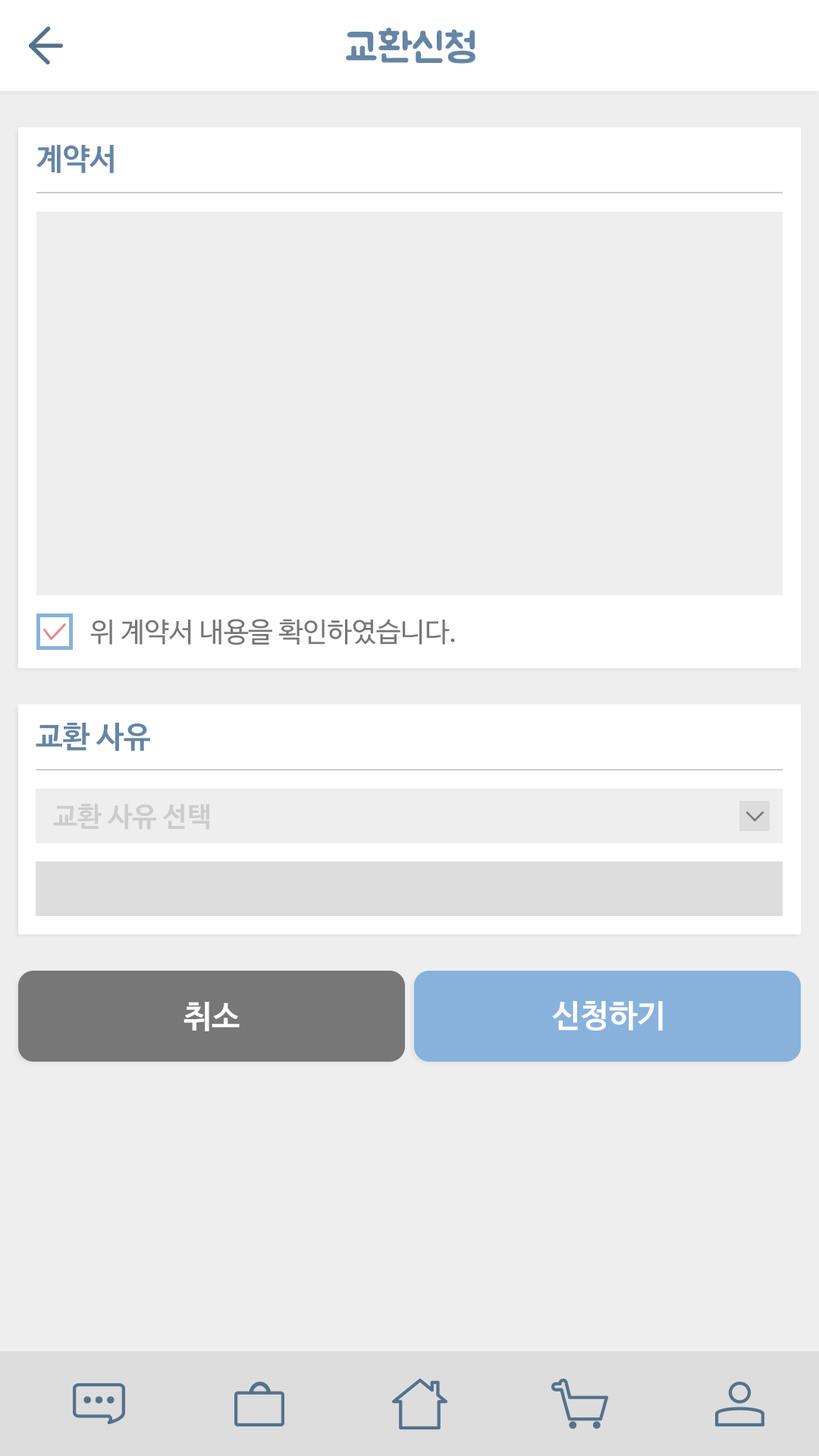
<style>
.page{position:relative;width:819px;height:1456px;background:#eeeeee}
.page>*{position:absolute;margin:0}
.t1{font:40.9px "BMJUA";color:#6585a5}
.t2{font:30.3px "NanumBarunGothicBold";color:#6585a5}
.t3{font:27.3px "NanumBarunGothic";color:#777777}
.t4{font:27.3px "NanumBarunGothicBold";color:#cccccc}
.t5{font:31.8px "NanumBarunGothicBold";color:#ffffff}
</style>
<div class="page">
<p class="t1" style="left:346px;top:27px;width:129px;height:37px">교환신청</p>
<p class="t2" style="left:36px;top:145px;width:78px;height:29px">계약서</p>
<p class="t3" style="left:90px;top:619px;width:365px;height:26px">위 계약서 내용을 확인하였습니다.</p>
<p class="t2" style="left:36px;top:723px;width:114px;height:28px">교환 사유</p>
<p class="t4" style="left:53px;top:804px;width:156px;height:26px">교환 사유 선택</p>
<p class="t5" style="left:184px;top:1002px;width:56px;height:29px">취소</p>
<p class="t5" style="left:552px;top:1001px;width:111px;height:30px">신청하기</p>
</div>
